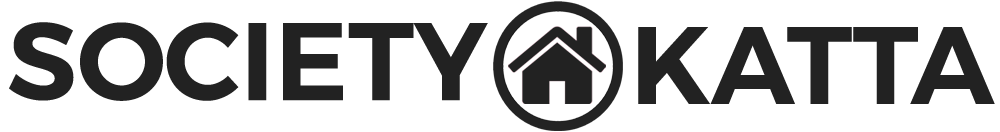
<style>
.page{position:relative;width:1000px;height:132px;background:#ffffff}
.page>*{position:absolute;margin:0}
.t1{font:110px "Montserrat-SemiBold";color:#222222}
</style>
<div class="page">
<p class="t1" style="left:9px;top:22px;width:479px;height:79px">SOCIETY</p>
<p class="t1" style="left:638px;top:27px;width:357px;height:77px">KATTA</p>
</div>
